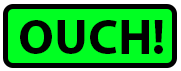
<style>
.page{position:relative;width:181px;height:71px;background:#00ff22}
.page>*{position:absolute;margin:0}
.t1{font:50px "MyriadPro-Bold";color:#000000}
</style>
<div class="page">
<p class="t1" style="left:20px;top:20px;width:143px;height:34px">OUCH!</p>
</div>
